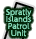
<style>
.page{position:relative;width:36px;height:39px;background:#ffffff}
.page>*{position:absolute;margin:0}
.t1{font:7px/7px "UDShinGoPro-Light";color:#8ae4be;font-weight:bold}
</style>
<div class="page">
<p class="t1" style="left:6px;top:8px;width:26px;height:29px;text-align:center">Spratly<br>Islands<br>Patrol<br>Unit</p>
</div>
